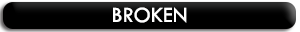
<style>
.page{position:relative;width:300px;height:32px;background:#000000}
.page>*{position:absolute;margin:0}
.t1{font:22.5px "TwCenMT-Regular";color:#ffffff}
</style>
<div class="page">
<p class="t1" style="left:113px;top:7px;width:74px;height:16px">BROKEN</p>
</div>
